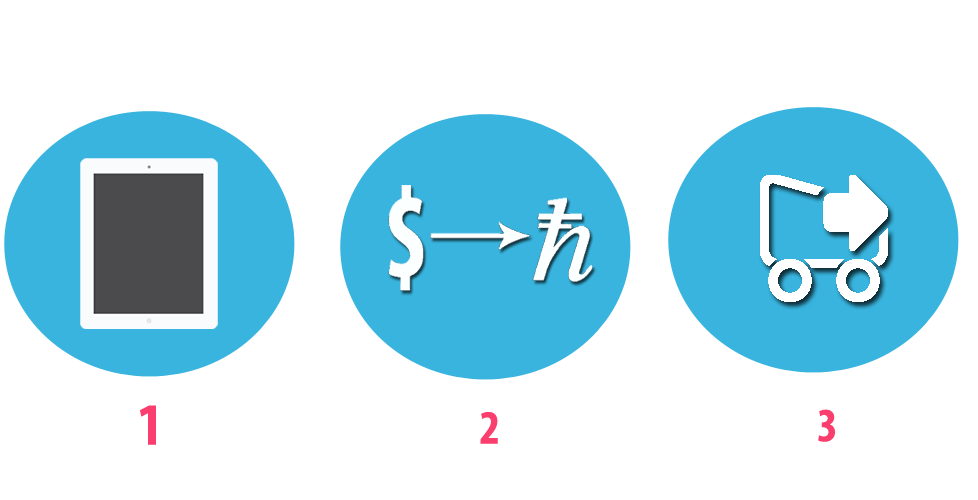
<style>
.page{position:relative;width:978px;height:500px;background:#ffffff}
.page>*{position:absolute;margin:0}
.t1{font:48px "MyriadPro-BoldCond";color:#fa3e6e}
</style>
<div class="page">
<p class="t1" style="left:480px;top:412px;width:18px;height:32px">2</p>
<p class="t1" style="left:818px;top:409px;width:17px;height:33px">3</p>
</div>
